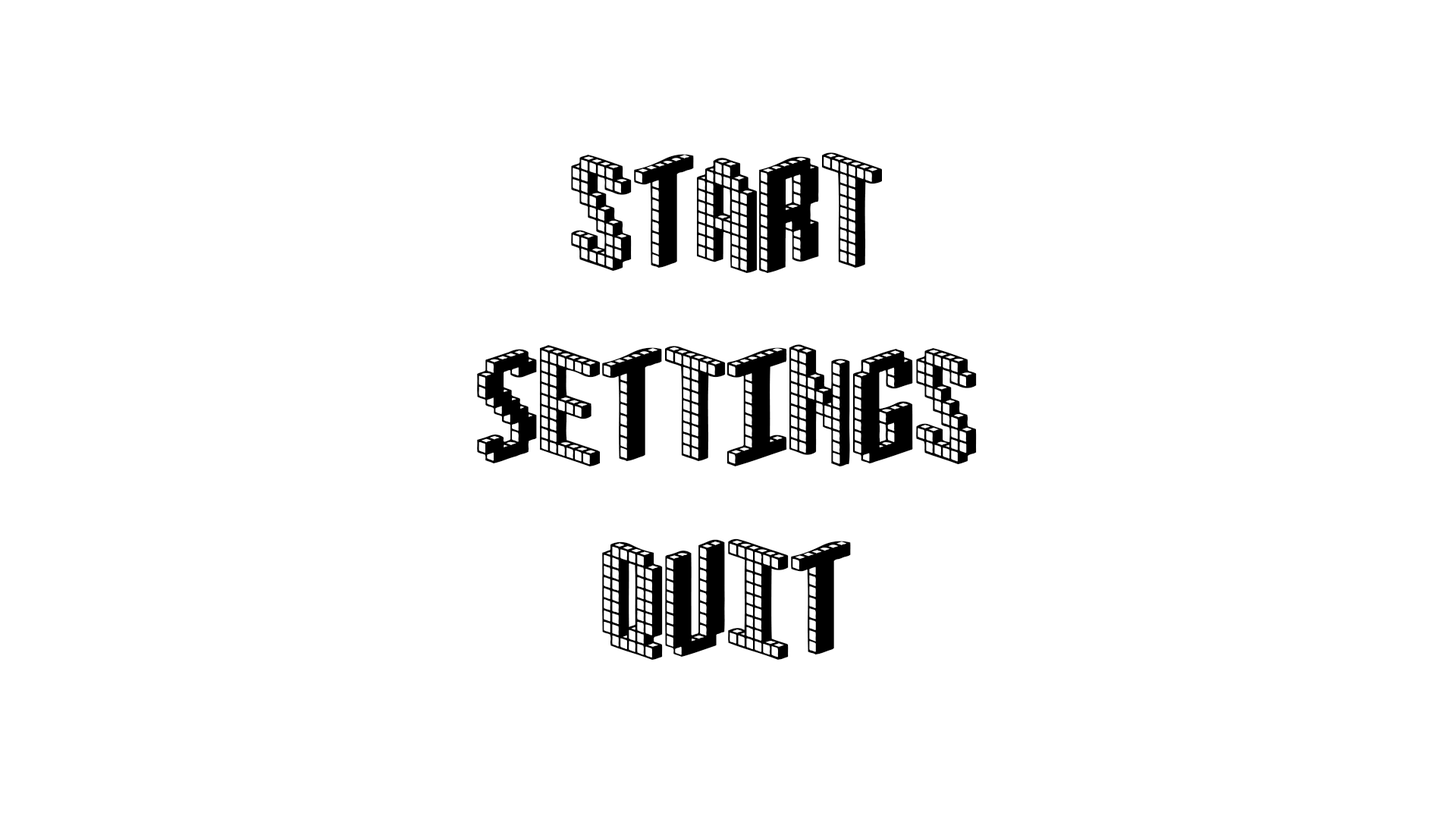
<style>
.page{position:relative;width:1456px;height:819px;background:#ffffff}
.page>*{position:absolute;margin:0}
.t1{font:126.4px "Blox-(BRK";color:#000000}
</style>
<div class="page">
<p class="t1" style="left:571px;top:152px;width:311px;height:121px">StArT</p>
<p class="t1" style="left:477px;top:344px;width:500px;height:122px">sEtTiNgS</p>
<p class="t1" style="left:602px;top:538px;width:249px;height:122px">QuIt</p>
</div>
